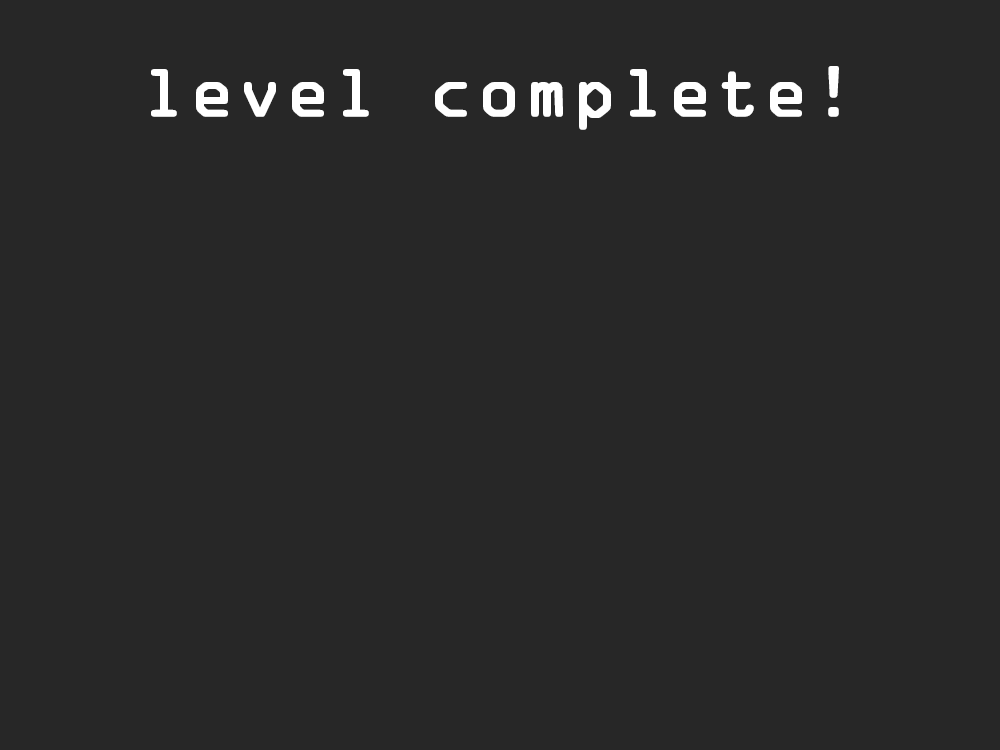
<style>
.page{position:relative;width:1000px;height:750px;background:#272727}
.page>*{position:absolute;margin:0}
.t1{font:64px "OCRAStd";color:#ffffff;font-weight:bold}
</style>
<div class="page">
<p class="t1" style="left:151px;top:66px;width:688px;height:64px">level complete!</p>
</div>
